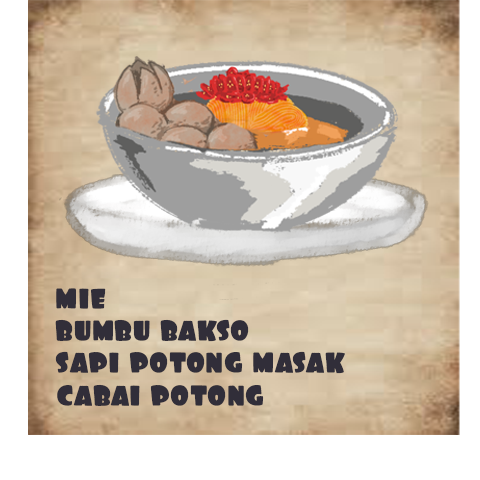
<style>
.page{position:relative;width:480px;height:480px;background:#ffffff}
.page>*{position:absolute;margin:0}
.t1{font:36px "Foo-Regular";color:#312e39}
</style>
<div class="page">
<p class="t1" style="left:56px;top:288px;width:50px;height:21px">mie</p>
<p class="t1" style="left:55px;top:319px;width:194px;height:23px">bumbu bakso</p>
<p class="t1" style="left:55px;top:351px;width:290px;height:23px">sapi potong masak</p>
<p class="t1" style="left:57px;top:384px;width:207px;height:22px">cabai potong</p>
</div>
